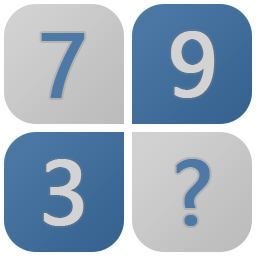
<style>
.page{position:relative;width:256px;height:256px}
.page>*{position:absolute;margin:0}
.t1{font:84px "MicrosoftYaHei";color:#4c79a6;font-weight:bold}
.t2{font:84px "MicrosoftYaHei";color:#d3d3d3;font-weight:bold}
</style>
<div class="page">
<p class="t1" style="left:41px;top:33px;width:44px;height:65px">7</p>
<p class="t2" style="left:171px;top:31px;width:44px;height:67px">9</p>
<p class="t2" style="left:43px;top:159px;width:41px;height:67px">3</p>
<p class="t1" style="left:176px;top:159px;width:34px;height:67px">?</p>
</div>
